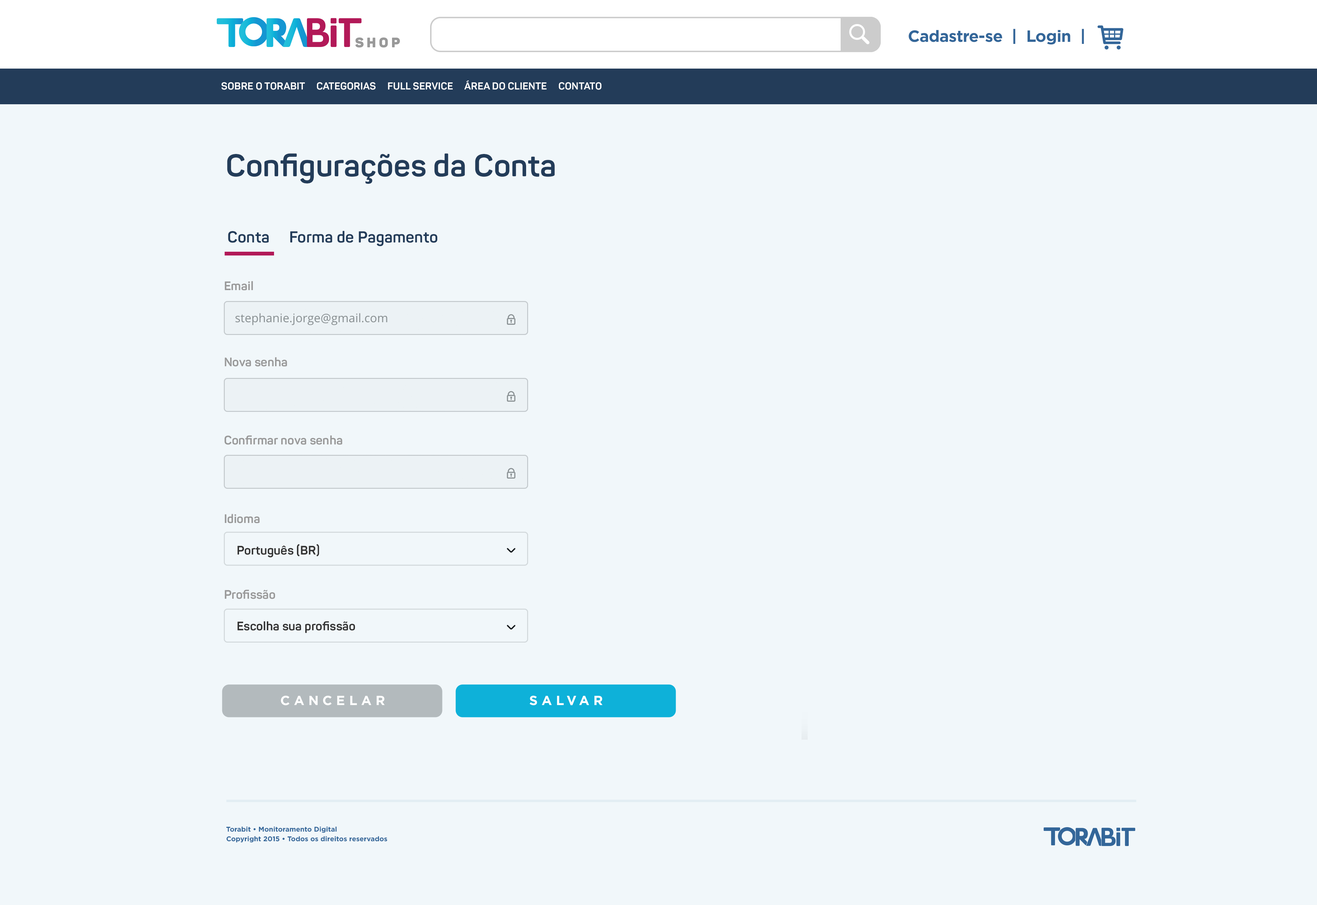
<style>
.page{position:relative;width:1317px;height:905px;background:#f1f7fa}
.page>*{position:absolute;margin:0}
.t1{font:16.3px "Gotham-Bold";letter-spacing:-0.02em;color:#336699}
.t2{font:13.6px "Panton-Black";letter-spacing:0.21em;color:#999999}
.t3{font:10px "Panton-Bold";letter-spacing:0.01em;color:#ffffff;text-transform:uppercase}
.t4{font:30.8px "Panton-Bold";letter-spacing:0.01em;color:#233c59}
.t5{font:15.7px "Panton-Bold";letter-spacing:0.01em;color:#233c59}
.t6{font:12.2px "Panton-Bold";letter-spacing:0.01em;color:#999999}
.t7{font:12.2px "Panton-Bold";letter-spacing:0.01em;color:#333333}
.t8{font:13.2px "Gotham-Bold";letter-spacing:0.3em;color:#ffffff}
.t9{font:6.8px "Gotham-Bold";color:#336699}
</style>
<div class="page">
<p class="t1" style="left:909px;top:29px;width:175px;height:16px">Cadastre-se  |  Login  |</p>
<p class="t2" style="left:355px;top:37px;width:45px;height:11px">SHOP</p>
<p class="t3" style="left:221px;top:80px;width:381px;height:10px">Sobre o Torabit     Categorias     FULL SERVICE     Área do cliente     Contato</p>
<p class="t4" style="left:227px;top:153px;width:328px;height:31px">Configurações da Conta</p>
<p class="t5" style="left:228px;top:231px;width:209px;height:15px">Conta       Forma de Pagamento</p>
<p class="t6" style="left:225px;top:281px;width:28px;height:10px">Email</p>
<p class="t6" style="left:225px;top:357px;width:62px;height:10px">Nova senha</p>
<p class="t6" style="left:224px;top:435px;width:118px;height:10px">Confirmar nova senha</p>
<p class="t6" style="left:225px;top:514px;width:35px;height:9px">Idioma</p>
<p class="t7" style="left:237px;top:544px;width:82px;height:14px">Português (BR)</p>
<p class="t6" style="left:225px;top:590px;width:50px;height:9px">Profissão</p>
<p class="t7" style="left:237px;top:621px;width:118px;height:12px">Escolha sua profissão</p>
<p class="t8" style="left:281px;top:696px;width:104px;height:10px">CANCELAR</p>
<p class="t8" style="left:530px;top:696px;width:73px;height:10px">SALVAR</p>
<p class="t9" style="left:226px;top:827px;width:111px;height:6px">Torabit • Monitoramento Digital</p>
<p class="t9" style="left:226px;top:836px;width:161px;height:7px">Copyright 2015 • Todos os direitos reservados</p>
</div>
